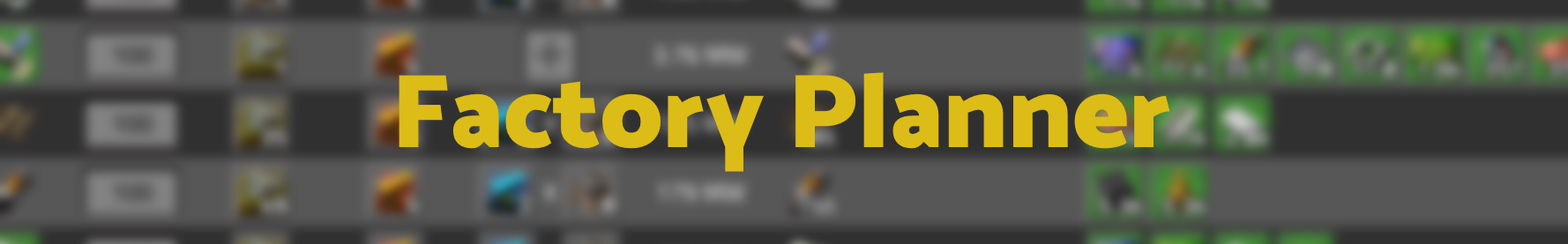
<style>
.page{position:relative;width:1568px;height:244px}
.page>*{position:absolute;margin:0}
.t1{font:105.8px "MoskUltra-Bold900";color:#dcbc16}
</style>
<div class="page">
<p class="t1" style="left:399px;top:72px;width:771px;height:100px">Factory Planner</p>
</div>
